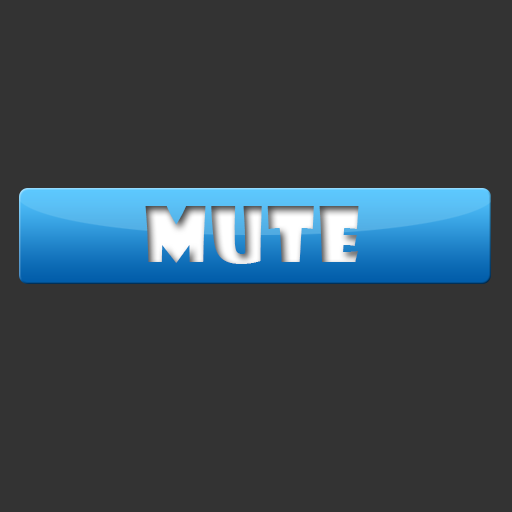
<style>
.page{position:relative;width:512px;height:512px;background:#333333}
.page>*{position:absolute;margin:0}
.t1{font:75.1px "ShowcardGothic-Reg";letter-spacing:0.05em}
</style>
<div class="page">
<p class="t1" style="left:145px;top:206px;width:214px;height:58px">MUTE</p>
</div>
